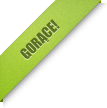
<style>
.page{position:relative;width:107px;height:108px;background:#ffffff}
.page>*{position:absolute;margin:0}
.t1{font:14px "Impact";color:#5b7020;text-transform:uppercase}
</style>
<div class="page">
<p class="t1" style="left:20px;top:19px;width:40px;height:40px;rotate:-45deg">Gorące!</p>
</div>
